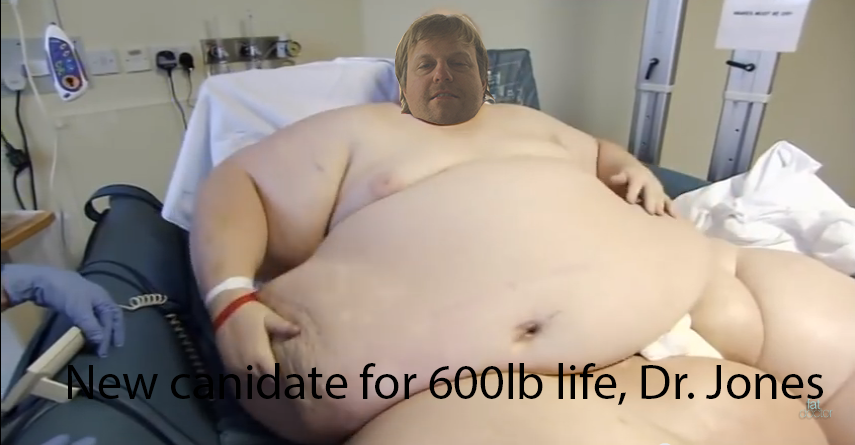
<style>
.page{position:relative;width:855px;height:445px}
.page>*{position:absolute;margin:0}
.t1{font:50px "MyriadPro-Regular";color:#000000}
</style>
<div class="page">
<p class="t1" style="left:68px;top:363px;width:755px;height:42px">New canidate for 600lb life, Dr. Jones</p>
</div>
